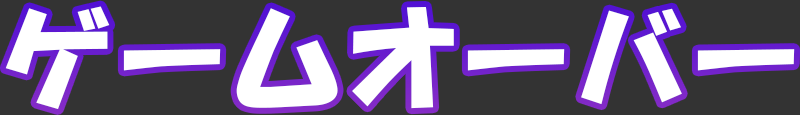
<style>
.page{position:relative;width:800px;height:115px;background:#333333}
.page>*{position:absolute;margin:0}
.t1{font:115px "HGSSoeiKakupoptai";color:#ffffff}
</style>
<div class="page">
<p class="t1" style="left:5px;top:6px;width:790px;height:103px">ゲームオーバー</p>
</div>
